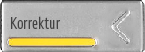
<style>
.page{position:relative;width:145px;height:52px}
.page>*{position:absolute;margin:0}
.t1{font:16px "Venn-CondensedRegular";color:#434343}
</style>
<div class="page">
<p class="t1" style="left:11px;top:16px;width:49px;height:13px">Korrektur</p>
</div>
